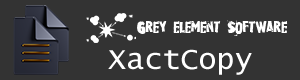
<style>
.page{position:relative;width:300px;height:80px;background:#333333}
.page>*{position:absolute;margin:0}
.t1{font:14px "RubbermaidSingle";color:#ffffff}
.t2{font:30px "LucidaConsole";color:#ffffff}
</style>
<div class="page">
<p class="t1" style="left:137px;top:20px;width:151px;height:16px">Grey element Software</p>
<p class="t2" style="left:108px;top:49px;width:144px;height:26px">XactCopy</p>
</div>
